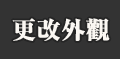
<style>
.page{position:relative;width:120px;height:59px;background:#333333}
.page>*{position:absolute;margin:0}
.t1{font:24px "RyuminPr6N-ExBold";color:#fbf8f3;font-weight:bold}
</style>
<div class="page">
<p class="t1" style="left:12px;top:18px;width:98px;height:23px">更改外觀</p>
</div>
